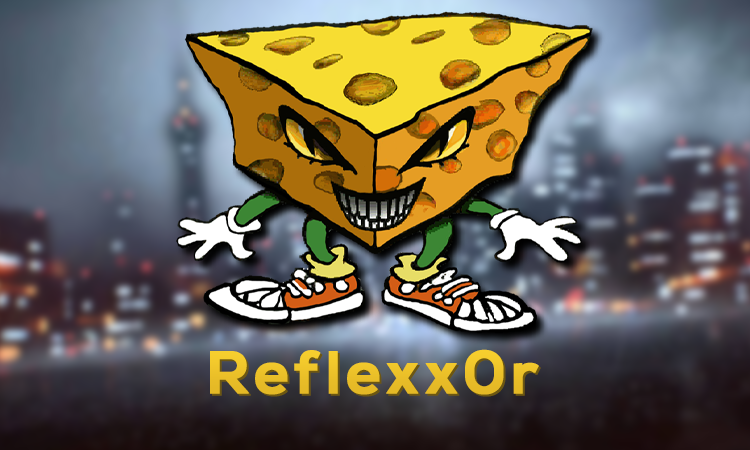
<style>
.page{position:relative;width:750px;height:450px}
.page>*{position:absolute;margin:0}
.t1{font:60.5px "NexaBold";letter-spacing:0.08em;color:#ebc029;font-weight:bold}
.t2{font:60.5px "NexaBold";letter-spacing:0.08em;color:#e8bc27;font-weight:bold}
</style>
<div class="page">
<p class="t1" style="left:210px;top:349px;width:329px;height:46px">Reflexx0r</p>
<p class="t2" style="left:212px;top:351px;width:329px;height:46px">Reflexx0r</p>
</div>
